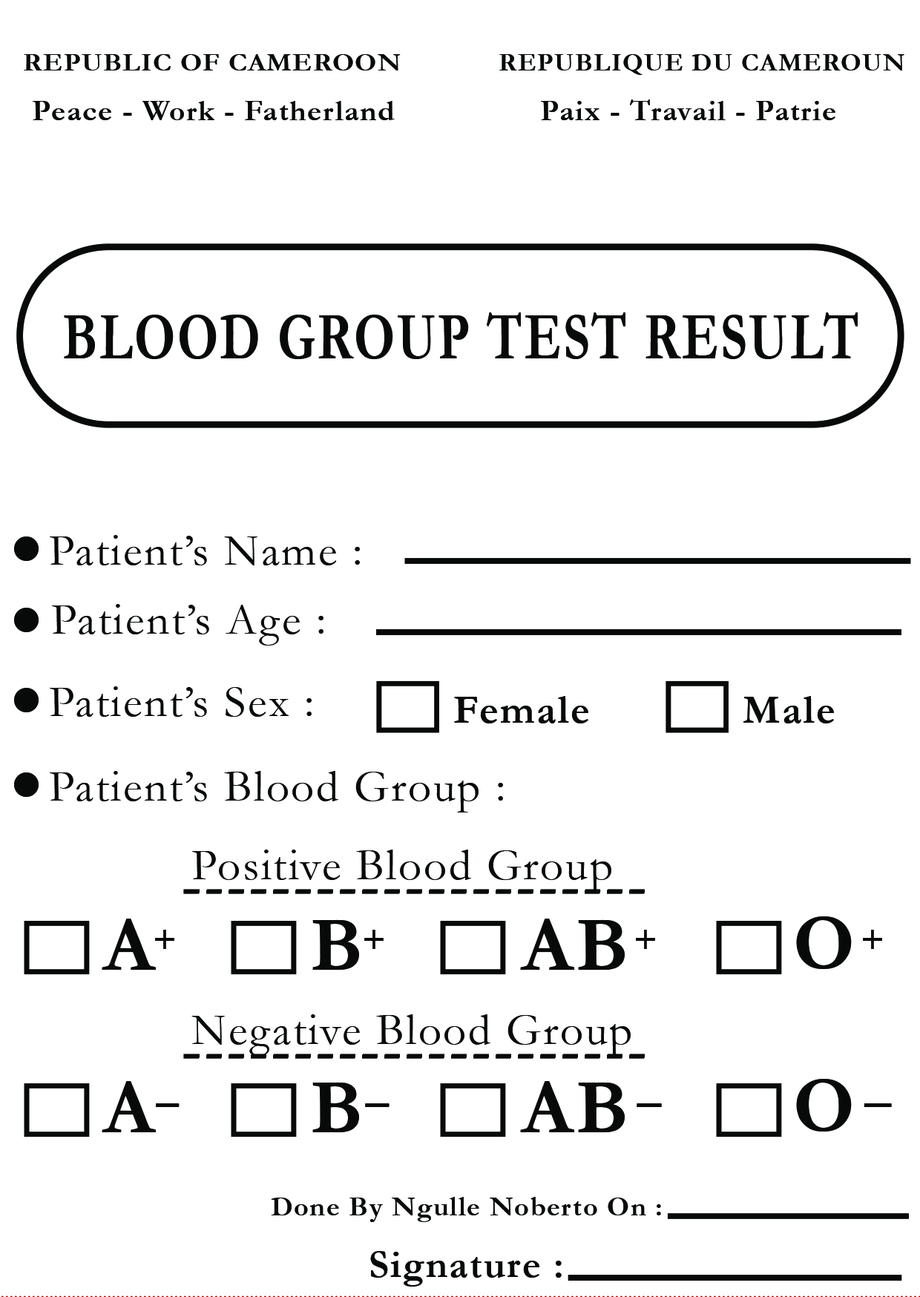
<style>
.page{position:relative;width:920px;height:1297px;background:#ffffff}
.page>*{position:absolute;margin:0}
.t1{font:25.9px "Garamond-Bold";letter-spacing:0.04em;color:#080a0a;text-transform:uppercase;scale:1.05 1}
.t2{font:25.9px "Garamond-Bold";letter-spacing:0.04em;color:#080a0a;text-transform:uppercase}
.t3{font:29.6px "Garamond-Bold";letter-spacing:0.04em;color:#080a0a}
.t4{font:67.6px "Garamond-Bold";letter-spacing:0.04em;color:#080a0a;scale:0.76 1}
.t5{font:45.6px "Garamond";letter-spacing:0.04em;color:#080a0a}
.t6{font:41px "Garamond-Bold";letter-spacing:0.04em;color:#080a0a}
.t7{font:77.9px "Garamond-Bold";letter-spacing:0.04em;color:#080a0a}
.t8{font:60.8px "Garamond-Bold";letter-spacing:0.04em;color:#080a0a}
.t9{font:60.8px "Garamond-Bold";letter-spacing:0.04em;color:#080a0a;scale:2.44 1}
.t10{font:60.8px "Garamond-Bold";letter-spacing:0.04em;color:#080a0a;scale:2.53 1}
.t11{font:60.8px "Garamond-Bold";letter-spacing:0.04em;color:#080a0a;scale:2.6 1}
.t12{font:60.8px "Garamond-Bold";letter-spacing:0.04em;color:#080a0a;scale:2.89 1}
.t13{font:28.2px "Garamond-Bold";letter-spacing:0.04em;color:#080a0a}
.t14{font:39.4px "Garamond-Bold";letter-spacing:0.04em;color:#080a0a}
</style>
<div class="page">
<p class="t1" style="left:24px;top:54px;width:377px;height:16px">Republic of Cameroon</p>
<p class="t2" style="left:499px;top:54px;width:405px;height:21px">REPUBLIQUE DU CAMEROUN</p>
<p class="t3" style="left:33px;top:101px;width:362px;height:19px">Peace - Work - Fatherland</p>
<p class="t3" style="left:541px;top:99px;width:294px;height:21px">Paix - Travail - Patrie</p>
<p class="t4" style="left:64px;top:312px;width:793px;height:47px">BLOOD GROUP TEST RESULT</p>
<p class="t5" style="left:50px;top:535px;width:310px;height:30px">Patient’s Name :</p>
<p class="t5" style="left:52px;top:604px;width:271px;height:41px">Patient’s Age :</p>
<p class="t5" style="left:50px;top:686px;width:262px;height:30px">Patient’s Sex :</p>
<p class="t6" style="left:454px;top:696px;width:134px;height:27px">Female</p>
<p class="t6" style="left:743px;top:696px;width:91px;height:27px">Male</p>
<p class="t5" style="left:50px;top:771px;width:453px;height:41px">Patient’s Blood Group :</p>
<p class="t5" style="left:192px;top:849px;width:419px;height:42px">Positive Blood Group</p>
<p class="t7" style="left:796px;top:916px;width:55px;height:53px">O</p>
<p class="t7" style="left:102px;top:918px;width:55px;height:51px">A</p>
<p class="t8" style="left:155px;top:929px;width:19px;height:20px">+</p>
<p class="t7" style="left:312px;top:919px;width:47px;height:50px">B</p>
<p class="t8" style="left:364px;top:929px;width:19px;height:20px">+</p>
<p class="t7" style="left:520px;top:918px;width:105px;height:51px">AB</p>
<p class="t8" style="left:636px;top:929px;width:19px;height:20px">+</p>
<p class="t8" style="left:863px;top:929px;width:19px;height:20px">+</p>
<p class="t5" style="left:191px;top:1014px;width:439px;height:41px">Negative Blood Group</p>
<p class="t7" style="left:102px;top:1081px;width:55px;height:51px">A</p>
<p class="t7" style="left:312px;top:1081px;width:47px;height:51px">B</p>
<p class="t7" style="left:520px;top:1081px;width:105px;height:51px">AB</p>
<p class="t7" style="left:796px;top:1078px;width:55px;height:53px">O</p>
<p class="t9" style="left:156px;top:1103px;width:23px;height:4px">-</p>
<p class="t10" style="left:365px;top:1103px;width:24px;height:4px">-</p>
<p class="t11" style="left:636px;top:1103px;width:26px;height:4px">-</p>
<p class="t12" style="left:863px;top:1103px;width:29px;height:4px">-</p>
<p class="t13" style="left:271px;top:1196px;width:390px;height:26px">Done By Ngulle Noberto On :</p>
<p class="t14" style="left:370px;top:1251px;width:191px;height:35px">Signature :</p>
</div>
